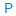
<style>
.page{position:relative;width:16px;height:16px;background:#ffffff}
.page>*{position:absolute;margin:0}
.t1{font:14.2px "Roboto-Regular";color:#008ccf}
</style>
<div class="page">
<p class="t1" style="left:5px;top:3px;width:8px;height:10px">P</p>
</div>
